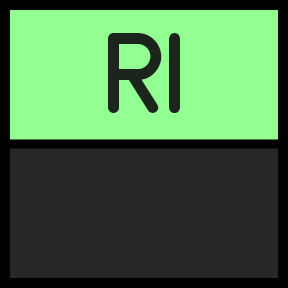
<style>
.page{position:relative;width:288px;height:288px;background:#272727}
.page>*{position:absolute;margin:0}
.t1{font:80px "MS-33558-Regular";letter-spacing:-0.04em;color:#151515}
</style>
<div class="page">
<p class="t1" style="left:108px;top:33px;width:72px;height:80px;opacity:0.97">RI</p>
</div>
